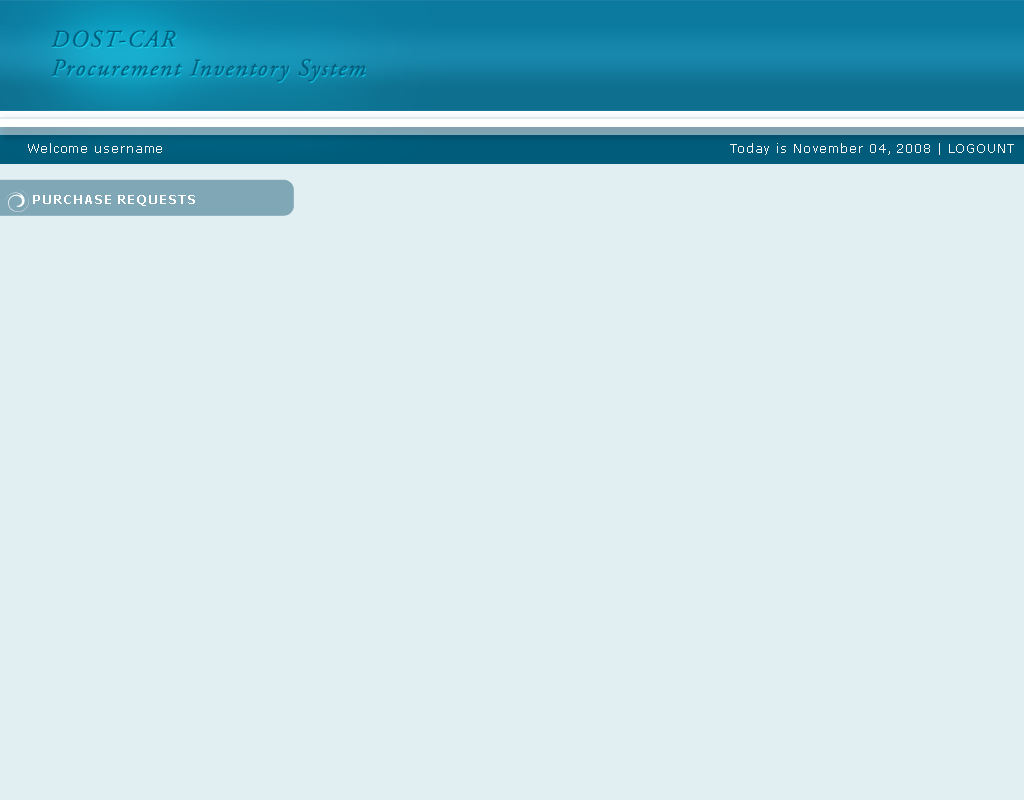
<style>
.page{position:relative;width:1024px;height:800px;background:#e1eff3}
.page>*{position:absolute;margin:0}
.t1{font:24px "AGaramondPro-Italic";letter-spacing:0.075em;color:#005d7b}
.t2{font:12px "Verdana";letter-spacing:0.075em;color:#f5f5f5}
.t3{font:12px "Verdana-Bold";letter-spacing:0.075em;color:#ffffff}
</style>
<div class="page">
<p class="t1" style="left:51px;top:30px;width:315px;height:53px">DOST-CAR<br>Procurement Inventory System</p>
<p class="t2" style="left:28px;top:143px;width:134px;height:10px">Welcome username</p>
<p class="t2" style="left:730px;top:143px;width:284px;height:12px">Today is November 04, 2008 | LOGOUNT</p>
<p class="t3" style="left:33px;top:195px;width:162px;height:11px">PURCHASE REQUESTS</p>
</div>
